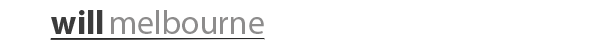
<style>
.page{position:relative;width:600px;height:48px;background:#ffffff}
.page>*{position:absolute;margin:0}
.t1{font:33.7px "MyriadPro-Bold";color:#3b3b3b}
.t2{font:33.7px "MyriadPro-Regular";color:#8d8c8c}
</style>
<div class="page">
<p class="t1" style="left:51px;top:10px;width:52px;height:24px">will</p>
<p class="t2" style="left:111px;top:10px;width:153px;height:24px">melbourne</p>
</div>
